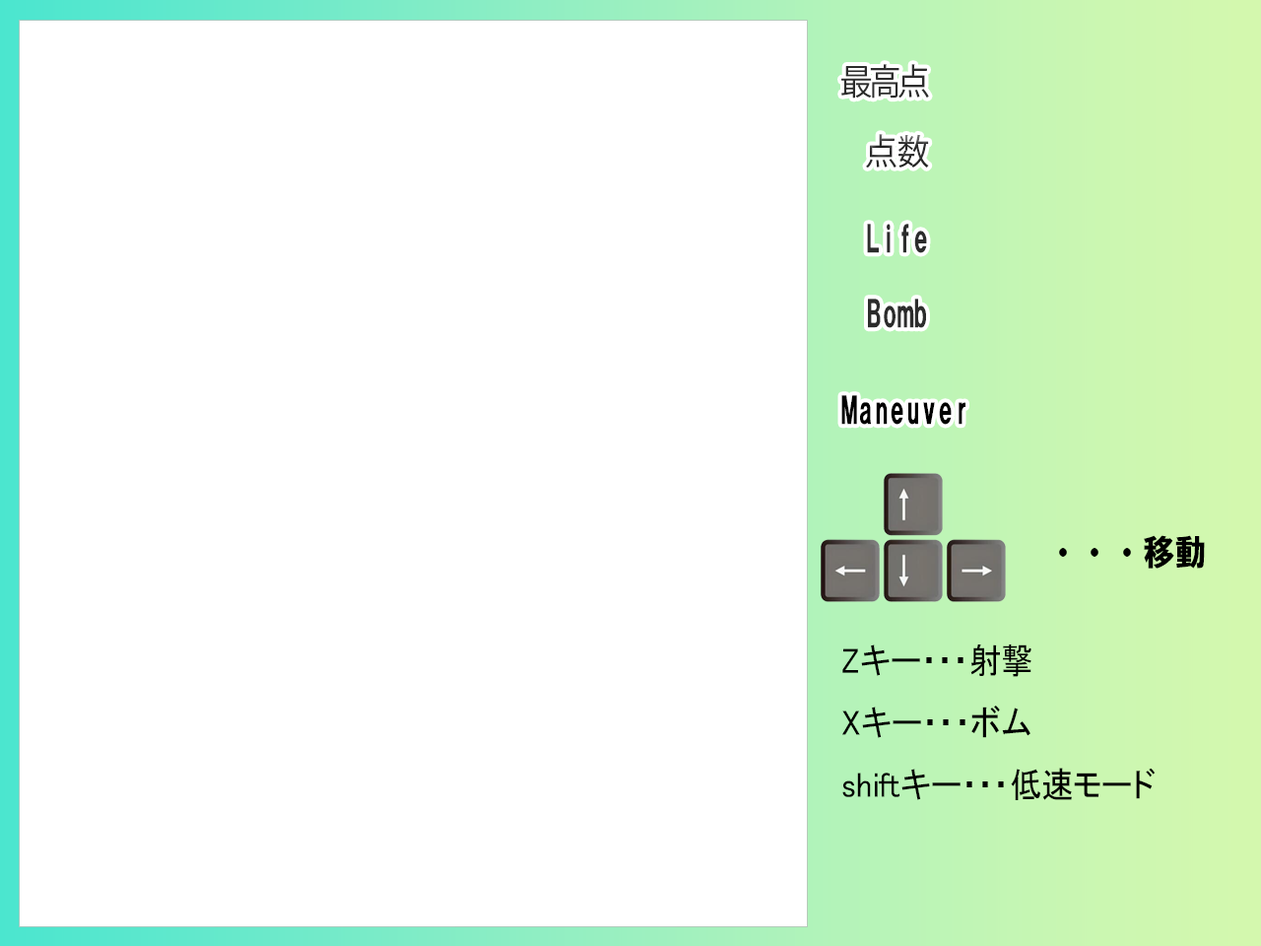
<style>
.page{position:relative;width:1261px;height:946px;background:#ffffff}
.page>*{position:absolute;margin:0}
.t1{font:35.5px "KozGoPr6N-Regular";color:#2c2c2c;scale:0.9 1}
.t2{font:35.5px "HGSoeiKakugothicUB";color:#2c2c2c;scale:0.9 1}
.t3{font:35.5px "HGSoeiKakugothicUB";color:#000000;scale:0.9 1}
.t4{font:35.5px "MS-PGothic";color:#000000;scale:0.9 1}
</style>
<div class="page">
<p class="t1" style="left:841px;top:64px;width:88px;height:35px">最高点</p>
<p class="t1" style="left:866px;top:134px;width:63px;height:33px">点数</p>
<p class="t2" style="left:867px;top:224px;width:60px;height:29px">Life</p>
<p class="t2" style="left:868px;top:298px;width:58px;height:30px">Bomb</p>
<p class="t3" style="left:841px;top:395px;width:124px;height:30px">Maneuver</p>
<p class="t3" style="left:1059px;top:535px;width:146px;height:33px">・・・移動</p>
<p class="t4" style="left:842px;top:644px;width:314px;height:156px">Zキー・・・射撃<br>Xキー・・・ボム<br>shiftキー・・・低速モード</p>
</div>
